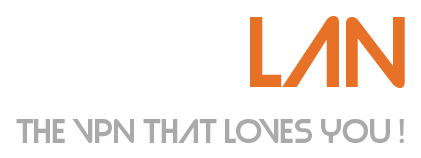
<style>
.page{position:relative;width:421px;height:158px;background:#ffffff}
.page>*{position:absolute;margin:0}
.t1{font:90px "Strasua-Regular";color:#e67127}
.t2{font:30.9px "Strasua-Regular";color:#aaaaaa}
</style>
<div class="page">
<p class="t1" style="left:250px;top:16px;width:155px;height:72px">LAN</p>
<p class="t2" style="left:16px;top:119px;width:388px;height:24px">The VPN that loves you !</p>
</div>
